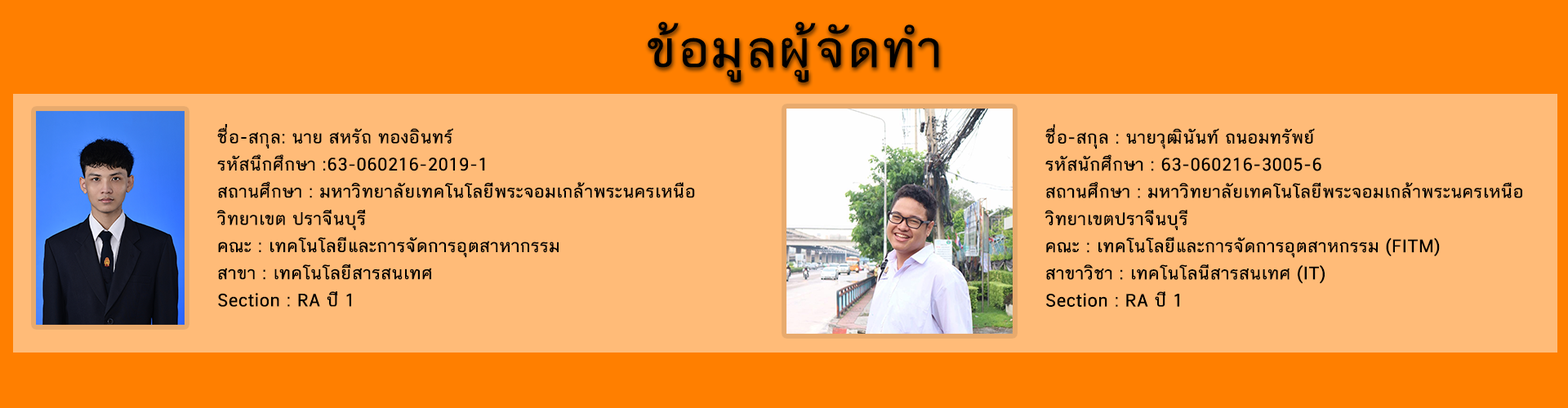
<style>
.page{position:relative;width:1568px;height:408px;background:#ffbb78}
.page>*{position:absolute;margin:0}
.t1{font:70.3px "CSChatThai";color:#000000;font-weight:bold}
.t2{font:23.8px/27.2px "CSChatThai";color:#000000;font-weight:bold}
</style>
<div class="page">
<p class="t1" style="left:648px;top:21px;width:291px;height:62px">ข้อมูลผู้จัดทำ</p>
<p class="t2" style="left:216px;top:124px;width:479px;height:183px">ชื่อ-สกุล: นาย สหรัถ ทองอินทร์ <br>รหัสนึกศึกษา :63-060216-2019-1 <br>สถานศึกษา : มหาวิทยาลัยเทคโนโลยีพระจอมเกล้าพระนครเหนือ <br>วิทยาเขต ปราจีนบุรี<br>คณะ : เทคโนโลยีและการจัดการอุตสาหากรรม <br>สาขา : เทคโนโลยีสารสนเทศ<br>Section : RA ปี 1</p>
<p class="t2" style="left:1045px;top:124px;width:477px;height:183px">ชื่อ-สกุล : นายวุฒินันท์ ถนอมทรัพย์<br>รหัสนักศึกษา : 63-060216-3005-6<br>สถานศึกษา : มหาวิทยาลัยเทคโนโลยีพระจอมเกล้าพระนครเหนือ <br>วิทยาเขตปราจีนบุรี<br>คณะ : เทคโนโลยีและการจัดการอุตสาหกรรม (FITM)<br>สาขาวิชา : เทคโนโลนีสารสนเทศ (IT)<br>Section : RA ปี 1</p>
</div>
